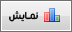
<style>
.page{position:relative;width:72px;height:32px}
.page>*{position:absolute;margin:0}
.t1{font:12px "Mj_CasablancaLight";color:#030000}
</style>
<div class="page">
<p class="t1" style="left:9px;top:11px;width:29px;height:11px">نمـایش</p>
</div>
